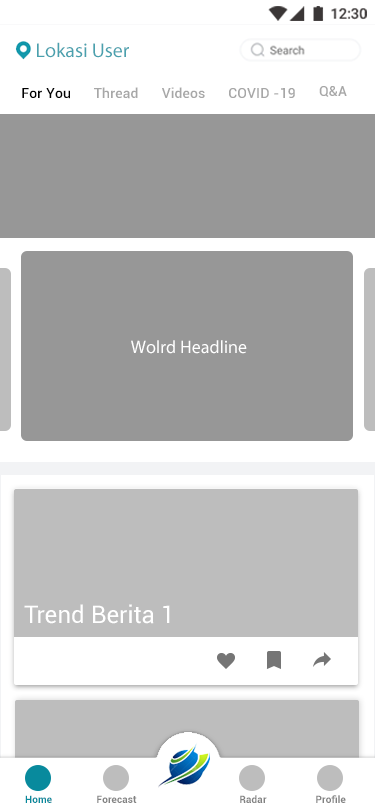
<style>
.page{position:relative;width:375px;height:812px;background:#979797}
.page>*{position:absolute;margin:0}
.t1{font:20px "MyriadPro-Regular";color:#4aa1ae}
.t2{font:14px "Roboto-Medium";letter-spacing:0.01em;color:#000000}
.t3{font:14px "Roboto-Medium";letter-spacing:0.01em;color:#a7a7a7}
.t4{font:18px "MyriadPro-Regular";color:#ffffff}
.t5{font:24px "Roboto-Regular";letter-spacing:0.005em;color:#ffffff}
.t6{font:10px "Roboto-Bold";letter-spacing:0.005em;color:#088a9d}
.t7{font:10px "Roboto-Bold";letter-spacing:0.005em;color:#828282}
</style>
<div class="page">
<p class="t1" style="left:37px;top:42px;width:92px;height:16px">Lokasi User</p>
<p class="t2" style="left:22px;top:88px;width:48px;height:11px">For You</p>
<p class="t3" style="left:94px;top:87px;width:44px;height:12px">Thread</p>
<p class="t3" style="left:162px;top:87px;width:43px;height:11px">Videos</p>
<p class="t3" style="left:229px;top:88px;width:66px;height:10px">COVID -19</p>
<p class="t3" style="left:319px;top:86px;width:28px;height:11px">Q&amp;A</p>
<p class="t4" style="left:131px;top:340px;width:116px;height:14px">Wolrd Headline</p>
<p class="t5" style="left:24px;top:604px;width:146px;height:20px">Trend Berita 1</p>
<p class="t6" style="left:25px;top:795px;width:27px;height:8px">Home</p>
<p class="t7" style="left:97px;top:795px;width:40px;height:8px">Forecast</p>
<p class="t7" style="left:240px;top:795px;width:27px;height:8px">Radar</p>
<p class="t7" style="left:316px;top:795px;width:30px;height:8px">Profile</p>
</div>
